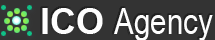
<style>
.page{position:relative;width:215px;height:40px;background:#333333}
.page>*{position:absolute;margin:0}
.t1{font:36px "ArialNarrow";color:#fefefe}
.t2{font:36px "Arial-BoldMT";color:#fefefe}
</style>
<div class="page">
<p class="t1" style="left:42px;top:8px;width:171px;height:33px"><span class="t2">ICO </span>Agency</p>
</div>
